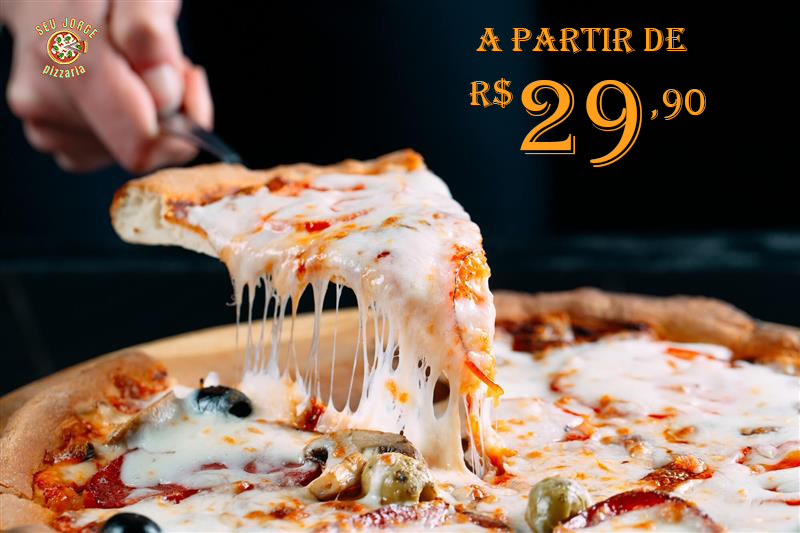
<style>
.page{position:relative;width:800px;height:533px}
.page>*{position:absolute;margin:0}
.t1{font:35.2px "Algerian";color:#ff9f1c}
.t2{font:35.8px "Algerian";color:#ff9f1c}
.t3{font:110.7px "Algerian";color:#ff9f1c}
.t4{font:39.4px "Algerian";color:#ff9f1c}
</style>
<div class="page">
<p class="t1" style="left:476px;top:28px;width:212px;height:26px">A PARTIR DE</p>
<p class="t2" style="left:469px;top:78px;width:44px;height:30px">r$</p>
<p class="t3" style="left:520px;top:80px;width:122px;height:87px">29</p>
<p class="t4" style="left:650px;top:89px;width:56px;height:31px">,90</p>
</div>
